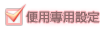
<style>
.page{position:relative;width:100px;height:30px;background:#ffffff}
.page>*{position:absolute;margin:0}
.t1{font:12px "AdobeFanHeitiStd-Bold";color:#906d6e;font-weight:bold}
</style>
<div class="page">
<p class="t1" style="left:26px;top:11px;width:74px;height:12px">便用專用設定</p>
</div>
